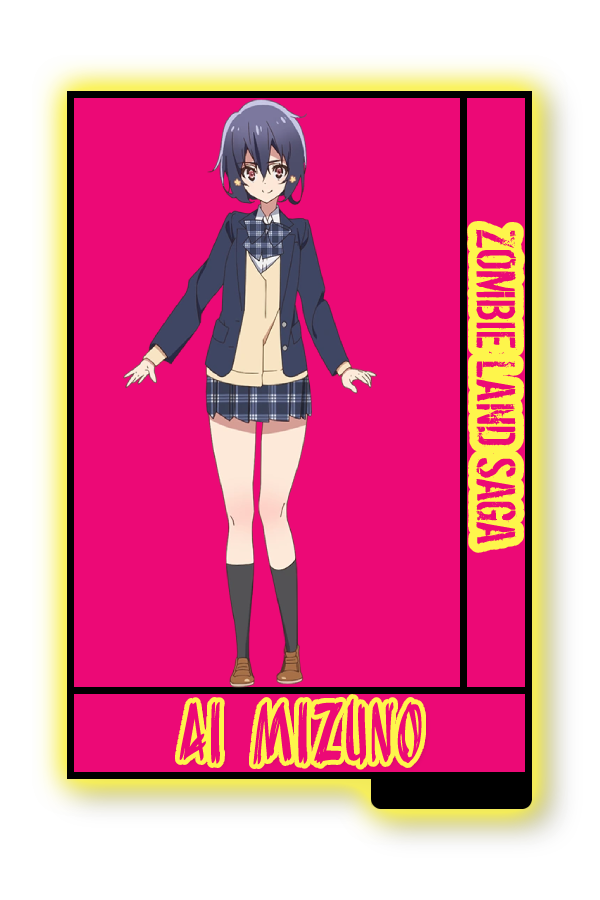
<style>
.page{position:relative;width:600px;height:900px;background:#ec0976}
.page>*{position:absolute;margin:0}
.t1{font:60.3px "DirtyEgo";color:#ec0976;scale:1.05 1}
.t2{font:72.2px "AnuDaw";color:#ec0976;scale:0.47 1}
</style>
<div class="page">
<p class="t1" style="left:476px;top:229px;width:41px;height:316px;rotate:90deg">ZOMBIE LAND SAGA</p>
<p class="t2" style="left:179px;top:698px;width:243px;height:68px">Ai Mizuno</p>
</div>
